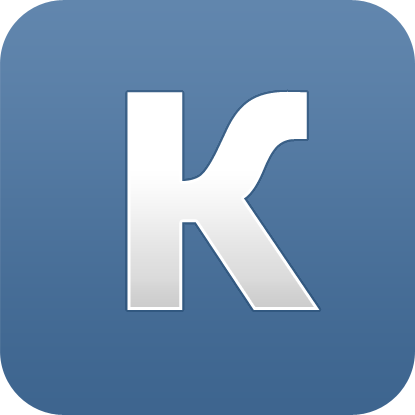
<style>
.page{position:relative;width:415px;height:415px}
.page>*{position:absolute;margin:0}
.t1{font:299.2px "Tahoma-Bold";color:#ffffff}
</style>
<div class="page">
<p class="t1" style="left:127px;top:91px;width:193px;height:219px">К</p>
</div>
